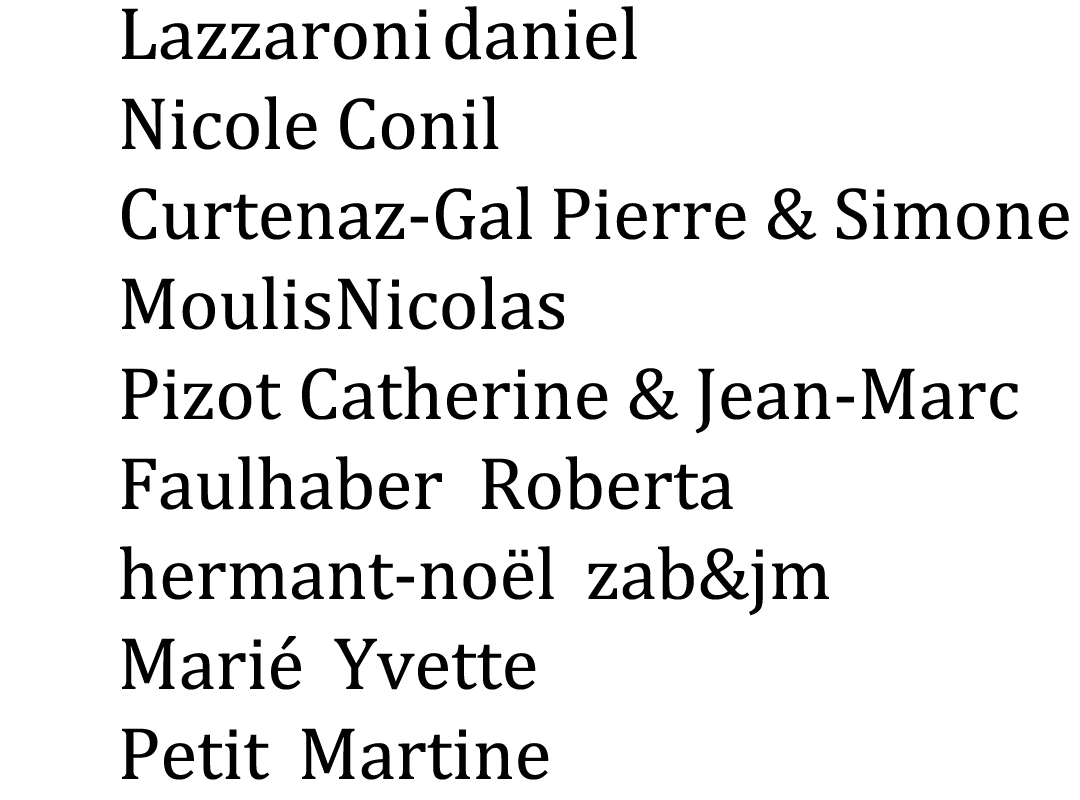
<style>
.page{position:relative;width:1080px;height:800px;background:#ffffff}
.page>*{position:absolute;margin:0}
.t1{font:75px "Cambria";color:#030000}
</style>
<div class="page">
<p class="t1" style="left:120px;top:6px;width:949px;height:774px">Lazzaroni daniel<br>Nicole Conil<br>Curtenaz-Gal Pierre &amp; Simone<br>Moulis Nicolas<br>Pizot Catherine &amp; Jean-Marc<br>Faulhaber Roberta<br>hermant-noël zab&amp;jm<br>Marié Yvette<br>Petit Martine</p>
</div>
